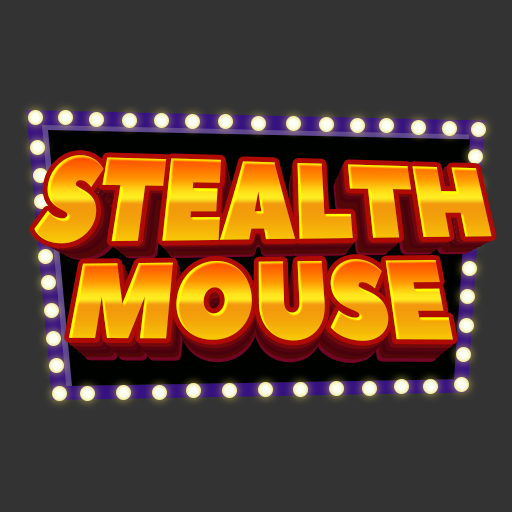
<style>
.page{position:relative;width:512px;height:512px;background:#333333}
.page>*{position:absolute;margin:0}
.t1{font:109.8px "PeaceSans";letter-spacing:-0.025em;scale:0.89 1}
.t2{font:107.6px "PeaceSans";letter-spacing:-0.025em;scale:0.89 1}
.t3{font:105.4px "PeaceSans";letter-spacing:-0.025em;scale:0.89 1}
.t4{font:103.3px "PeaceSans";letter-spacing:-0.025em;scale:0.89 1}
.t5{font:107.2px "PeaceSans";letter-spacing:-0.025em;scale:0.89 1}
.t6{font:104.8px "PeaceSans";letter-spacing:-0.025em;scale:0.89 1}
</style>
<div class="page">
<p class="t1" style="left:34px;top:155px;width:458px;height:89px">STEALTH</p>
<p class="t2" style="left:39px;top:158px;width:448px;height:87px">STEALTH</p>
<p class="t3" style="left:43px;top:162px;width:440px;height:85px">STEALTH</p>
<p class="t4" style="left:47px;top:166px;width:432px;height:83px">STEALTH</p>
<p class="t1" style="left:69px;top:259px;width:384px;height:82px">MOUSE</p>
<p class="t5" style="left:73px;top:264px;width:376px;height:81px">MOUSE</p>
<p class="t6" style="left:77px;top:270px;width:367px;height:78px">MOUSE</p>
</div>
